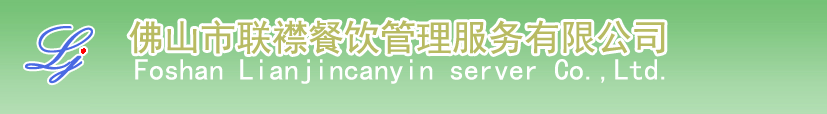
<style>
.page{position:relative;width:827px;height:114px}
.page>*{position:absolute;margin:0}
.t1{font:36px "SimHei";color:#b8bb62}
.t2{font:30px "SimHei";color:#ffffff}
</style>
<div class="page">
<p class="t1" style="left:129px;top:20px;width:536px;height:34px">佛山市联襟餐饮管理服务有限公司</p>
<p class="t2" style="left:135px;top:59px;width:530px;height:25px">Foshan Lianjincanyin server Co.,Ltd.</p>
</div>
